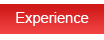
<style>
.page{position:relative;width:104px;height:40px;background:#ffffff}
.page>*{position:absolute;margin:0}
.t1{font:14.7px "ArialMT";color:#ffffff}
</style>
<div class="page">
<p class="t1" style="left:16px;top:12px;width:73px;height:14px">Experience</p>
</div>
